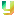
<style>
.page{position:relative;width:16px;height:16px;background:#ffffff}
.page>*{position:absolute;margin:0}
.t1{font:16px "PFTempestaSeven-Bold"}
</style>
<div class="page">
<p class="t1" style="left:2px;top:1px;width:12px;height:14px">y</p>
</div>
